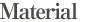
<style>
.page{position:relative;width:90px;height:22px;background:#ffffff}
.page>*{position:absolute;margin:0}
.t1{font:22px "RyuminPro-ExBold";letter-spacing:-0.08em;color:#4c4843}
</style>
<div class="page">
<p class="t1" style="left:0px;top:2px;width:78px;height:18px">Material</p>
</div>
